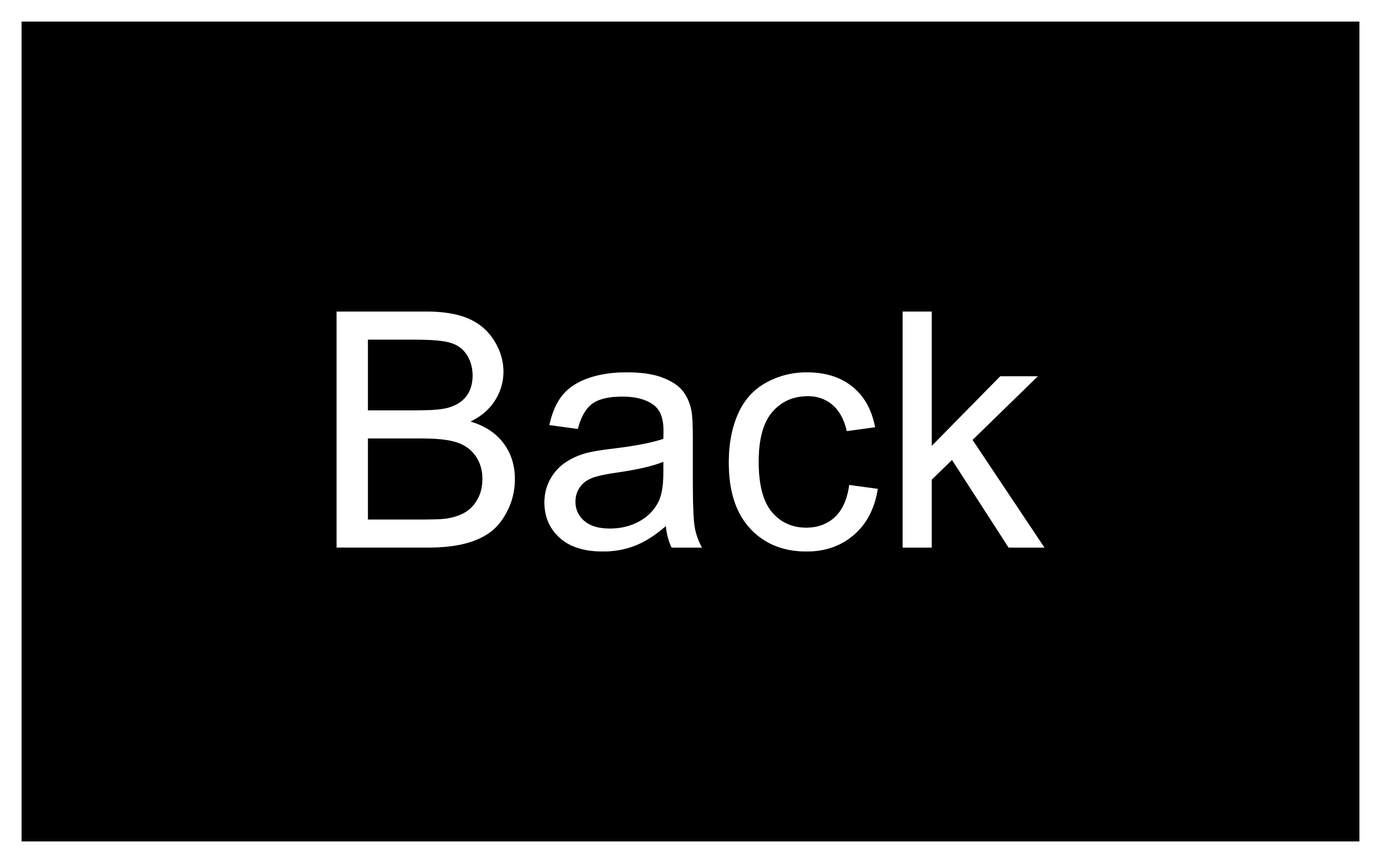
<style>
.page{position:relative;width:1381px;height:863px;background:#000000}
.page>*{position:absolute;margin:0}
.t1{font:329.7px "ArialMT";color:#ffffff}
</style>
<div class="page">
<p class="t1" style="left:336px;top:312px;width:709px;height:240px">Back</p>
</div>
